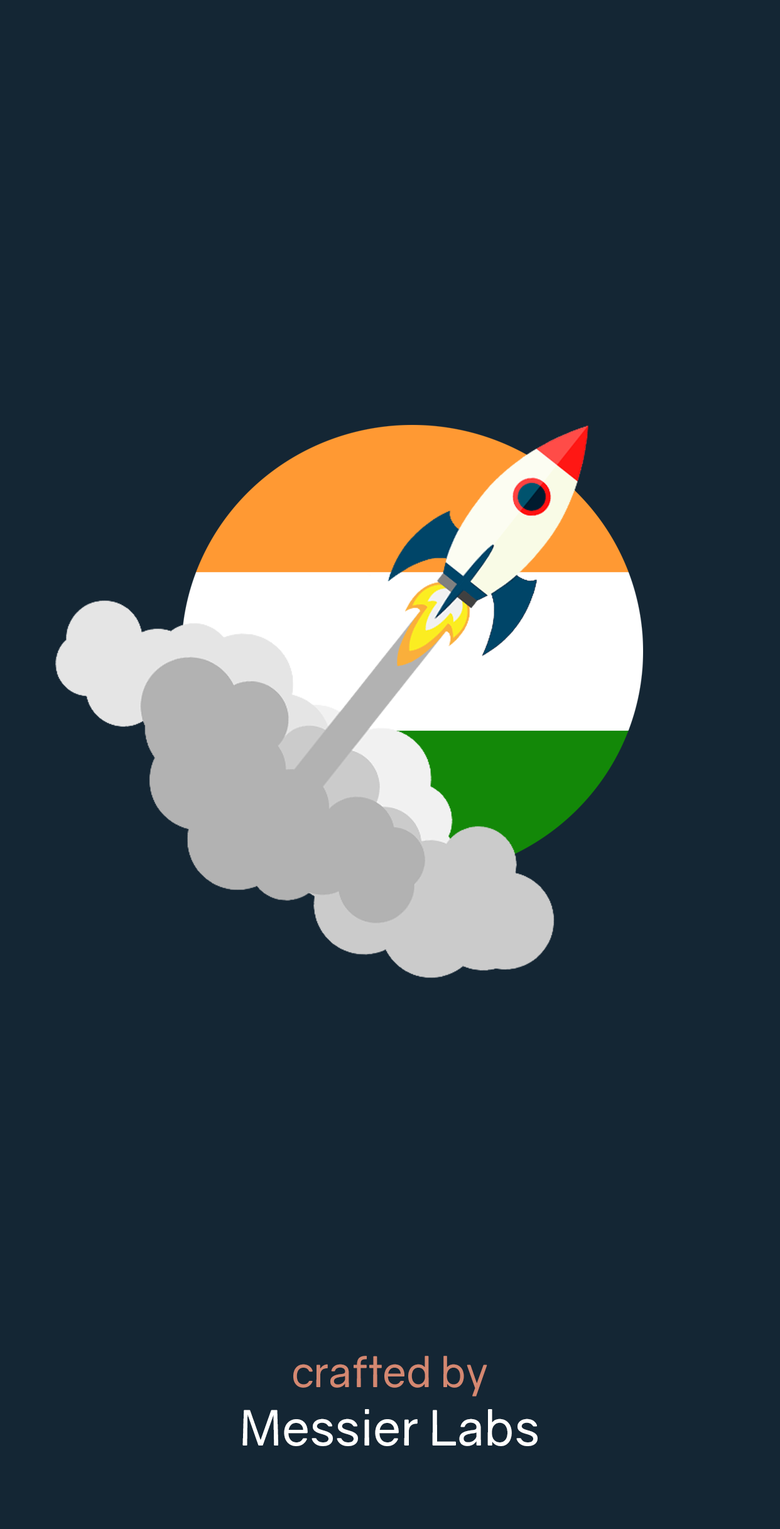
<style>
.page{position:relative;width:780px;height:1529px;background:#142634}
.page>*{position:absolute;margin:0}
.t1{font:48.8px "Gravity-Regular";color:#ffffff}
.t2{font:41.9px "Gravity-Regular";color:#d48871}
</style>
<div class="page">
<p class="t1" style="left:242px;top:1356px;width:295px;height:90px;text-align:center"><span class="t2">crafted by<br></span>Messier Labs</p>
</div>
